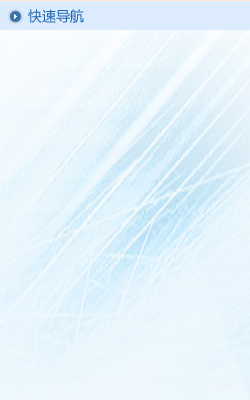
<style>
.page{position:relative;width:250px;height:400px}
.page>*{position:absolute;margin:0}
.t1{font:14px "MicrosoftYaHei";color:#1c66b1;text-transform:uppercase}
</style>
<div class="page">
<p class="t1" style="left:28px;top:9px;width:56px;height:14px">快速导航</p>
</div>
